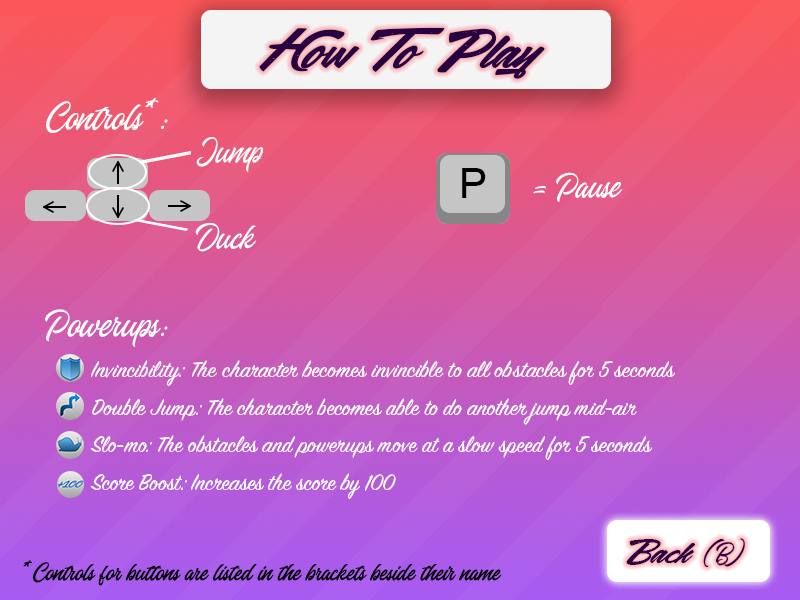
<style>
.page{position:relative;width:800px;height:600px}
.page>*{position:absolute;margin:0}
.t1{font:108.3px "Acceleration-&-Reaction";color:#270041}
.t2{font:45.8px "Sangharia";color:#fefefe}
.t3{font:41.7px "Sangharia";color:#ffffff}
.t4{font:41.7px "ArialMT";color:#000000}
.t5{font:25px/37.5px "SignPainter-HouseScript";color:#fefefe}
.t6{font:66.2px "Acceleration-&-Reaction";color:#270041}
.t7{font:33.1px "Sangharia";color:#270041}
.t8{font:29.2px "Sangharia";color:#000000}
</style>
<div class="page">
<p class="t1" style="left:259px;top:27px;width:286px;height:52px">How To Play</p>
<p class="t2" style="left:46px;top:98px;width:122px;height:35px">Controls*:</p>
<p class="t3" style="left:196px;top:137px;width:68px;height:35px">Jump</p>
<p class="t4" style="left:462px;top:168px;width:24px;height:30px">P</p>
<p class="t3" style="left:533px;top:172px;width:90px;height:30px">= Pause</p>
<p class="t3" style="left:195px;top:222px;width:62px;height:30px">Duck</p>
<p class="t2" style="left:45px;top:309px;width:123px;height:38px">Powerups:</p>
<p class="t5" style="left:90px;top:360px;width:585px;height:139px">Invincibility: The character becomes invincible to all obstacles for 5 seconds   <br>Double Jump: The character becomes able to do another jump mid-air <br>Slo-mo: The obstacles and powerups move at a slow speed for 5 seconds <br>Score Boost: Increases the score by 100</p>
<p class="t6" style="left:626px;top:538px;width:119px;height:29px">Back <span class="t7">(B)</span></p>
<p class="t8" style="left:23px;top:560px;width:479px;height:26px">*Controls for buttons are listed in the brackets beside their name</p>
</div>
